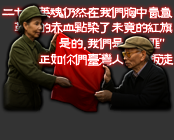
<style>
.page{position:relative;width:174px;height:140px;background:#333333}
.page>*{position:absolute;margin:0}
.t1{font:14.6px/15.8px "FZZJ-MSHLFW";letter-spacing:-0.17em;color:#ffffff}
</style>
<div class="page">
<p class="t1" style="left:2px;top:6px;width:172px;height:60px;text-align:right">二七的英魂仍然在我们胸中氤氲<br>革命的赤血点染了未竟的红旗<br>是的 , 我们是“赤匪”<br>正如你们台湾人民的叛徒</p>
</div>
